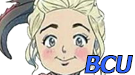
<style>
.page{position:relative;width:135px;height:75px;background:#ffffff}
.page>*{position:absolute;margin:0}
.t1{font:24px "Tahoma-Bold";letter-spacing:-0.065em;font-weight:bold;font-style:italic}
</style>
<div class="page">
<p class="t1" style="left:84px;top:55px;width:49px;height:19px">BCU</p>
</div>
